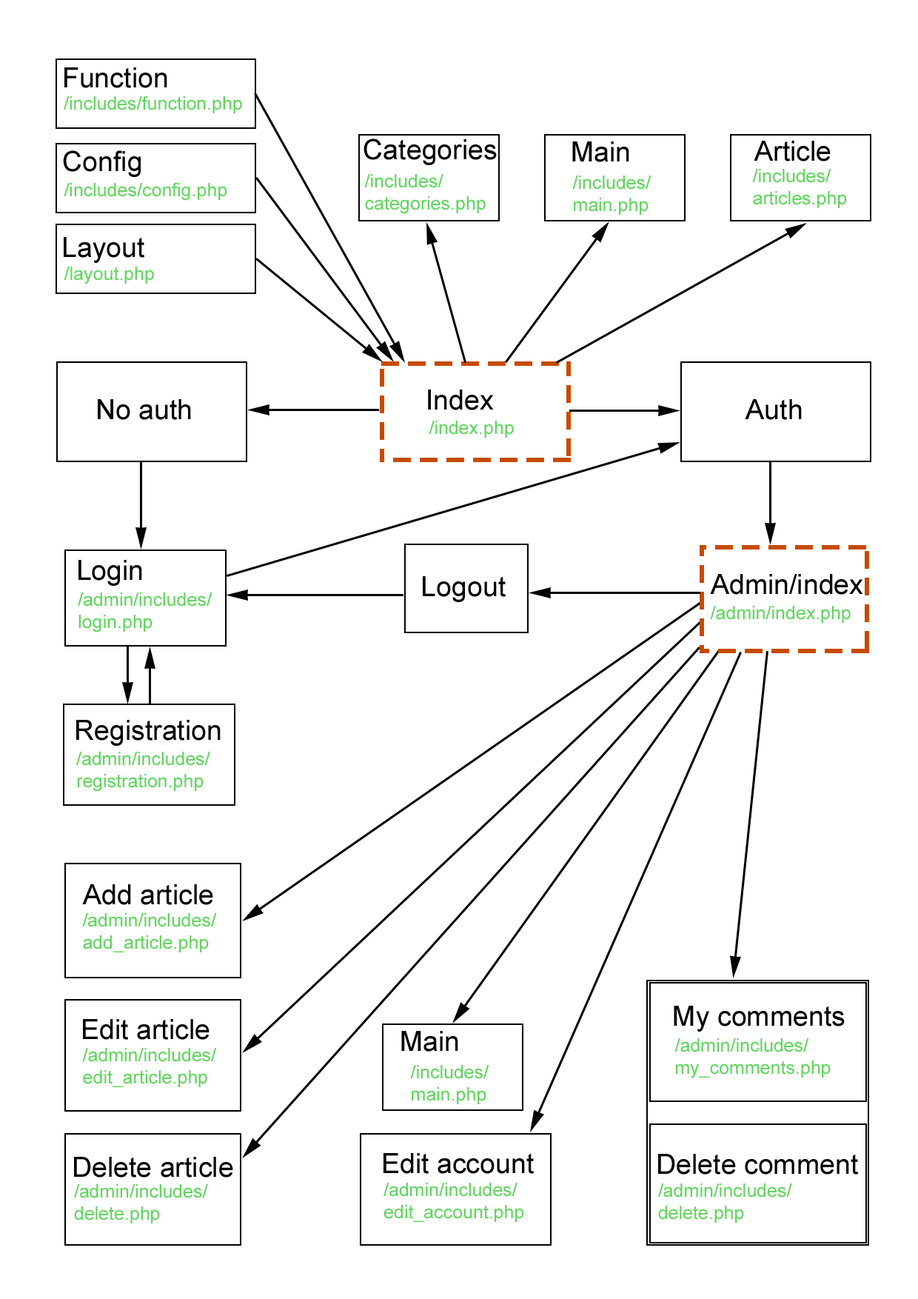
<style>
.page{position:relative;width:918px;height:1299px;background:#ffffff}
.page>*{position:absolute;margin:0}
.t1{font:27.8px "ArialMT";color:#000000}
.t2{font:18.5px "ArialMT";color:#62d55f}
.t3{font:18.5px "ArialMT";color:#62d560}
</style>
<div class="page">
<p class="t1" style="left:64px;top:67px;width:103px;height:21px">Function</p>
<p class="t2" style="left:64px;top:96px;width:178px;height:17px">/includes/function.php</p>
<p class="t1" style="left:364px;top:138px;width:133px;height:27px">Categories</p>
<p class="t1" style="left:572px;top:141px;width:57px;height:21px">Main</p>
<p class="t1" style="left:754px;top:141px;width:77px;height:20px">Article</p>
<p class="t1" style="left:63px;top:150px;width:78px;height:27px">Config</p>
<p class="t2" style="left:752px;top:169px;width:95px;height:39px">/includes/<br>articles.php</p>
<p class="t2" style="left:64px;top:182px;width:163px;height:19px">/includes/config.php</p>
<p class="t2" style="left:364px;top:174px;width:122px;height:40px">/includes/<br>categories.php</p>
<p class="t2" style="left:572px;top:175px;width:80px;height:40px">/includes/<br>main.php</p>
<p class="t1" style="left:64px;top:237px;width:80px;height:26px">Layout</p>
<p class="t2" style="left:64px;top:267px;width:90px;height:17px">/layout.php</p>
<p class="t1" style="left:428px;top:389px;width:66px;height:21px">Index</p>
<p class="t1" style="left:98px;top:399px;width:93px;height:21px">No auth</p>
<p class="t1" style="left:745px;top:399px;width:57px;height:21px">Auth</p>
<p class="t2" style="left:429px;top:421px;width:85px;height:17px">/index.php</p>
<p class="t1" style="left:78px;top:560px;width:64px;height:26px">Login</p>
<p class="t1" style="left:423px;top:576px;width:83px;height:26px">Logout</p>
<p class="t1" style="left:710px;top:574px;width:153px;height:21px">Admin/index</p>
<p class="t2" style="left:78px;top:592px;width:135px;height:40px">/admin/includes/<br>login.php</p>
<p class="t2" style="left:710px;top:606px;width:141px;height:17px">/admin/index.php</p>
<p class="t1" style="left:76px;top:720px;width:145px;height:26px">Registration</p>
<p class="t3" style="left:76px;top:752px;width:134px;height:40px">/admin/includes/<br>registration.php</p>
<p class="t1" style="left:82px;top:884px;width:131px;height:21px">Add article</p>
<p class="t2" style="left:82px;top:913px;width:135px;height:39px">/admin/includes/<br>add_article.php</p>
<p class="t1" style="left:674px;top:1006px;width:171px;height:25px">My comments</p>
<p class="t1" style="left:83px;top:1019px;width:127px;height:21px">Edit article</p>
<p class="t1" style="left:401px;top:1031px;width:57px;height:20px">Main</p>
<p class="t2" style="left:82px;top:1048px;width:135px;height:39px">/admin/includes/<br>edit_article.php</p>
<p class="t2" style="left:675px;top:1038px;width:156px;height:40px">/admin/includes/<br>my_comments.php</p>
<p class="t2" style="left:410px;top:1065px;width:79px;height:39px">/includes/<br>main.php</p>
<p class="t1" style="left:74px;top:1157px;width:159px;height:20px">Delete article</p>
<p class="t1" style="left:384px;top:1153px;width:150px;height:21px">Edit account</p>
<p class="t1" style="left:658px;top:1154px;width:200px;height:20px">Delete comment</p>
<p class="t2" style="left:74px;top:1184px;width:134px;height:39px">/admin/includes/<br>delete.php</p>
<p class="t2" style="left:384px;top:1182px;width:140px;height:40px">/admin/includes/<br>edit_account.php</p>
<p class="t2" style="left:658px;top:1183px;width:134px;height:39px">/admin/includes/<br>delete.php</p>
</div>
